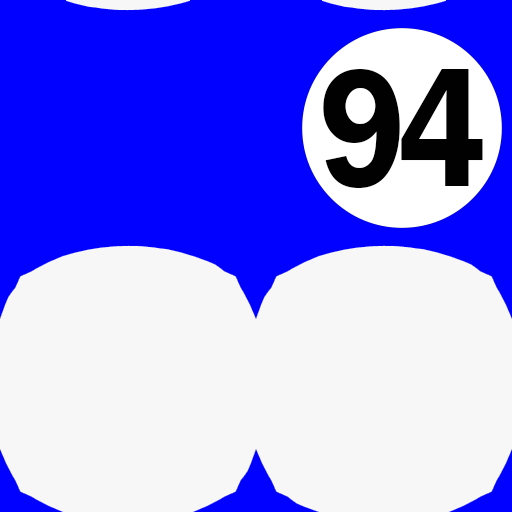
<style>
.page{position:relative;width:512px;height:512px;background:#f7f7f7}
.page>*{position:absolute;margin:0}
.t1{font:172.5px "FranklinGothic-Demi";letter-spacing:-0.05em;color:#010101;scale:0.87 1}
</style>
<div class="page">
<p class="t1" style="left:323px;top:69px;width:160px;height:119px">94</p>
</div>
